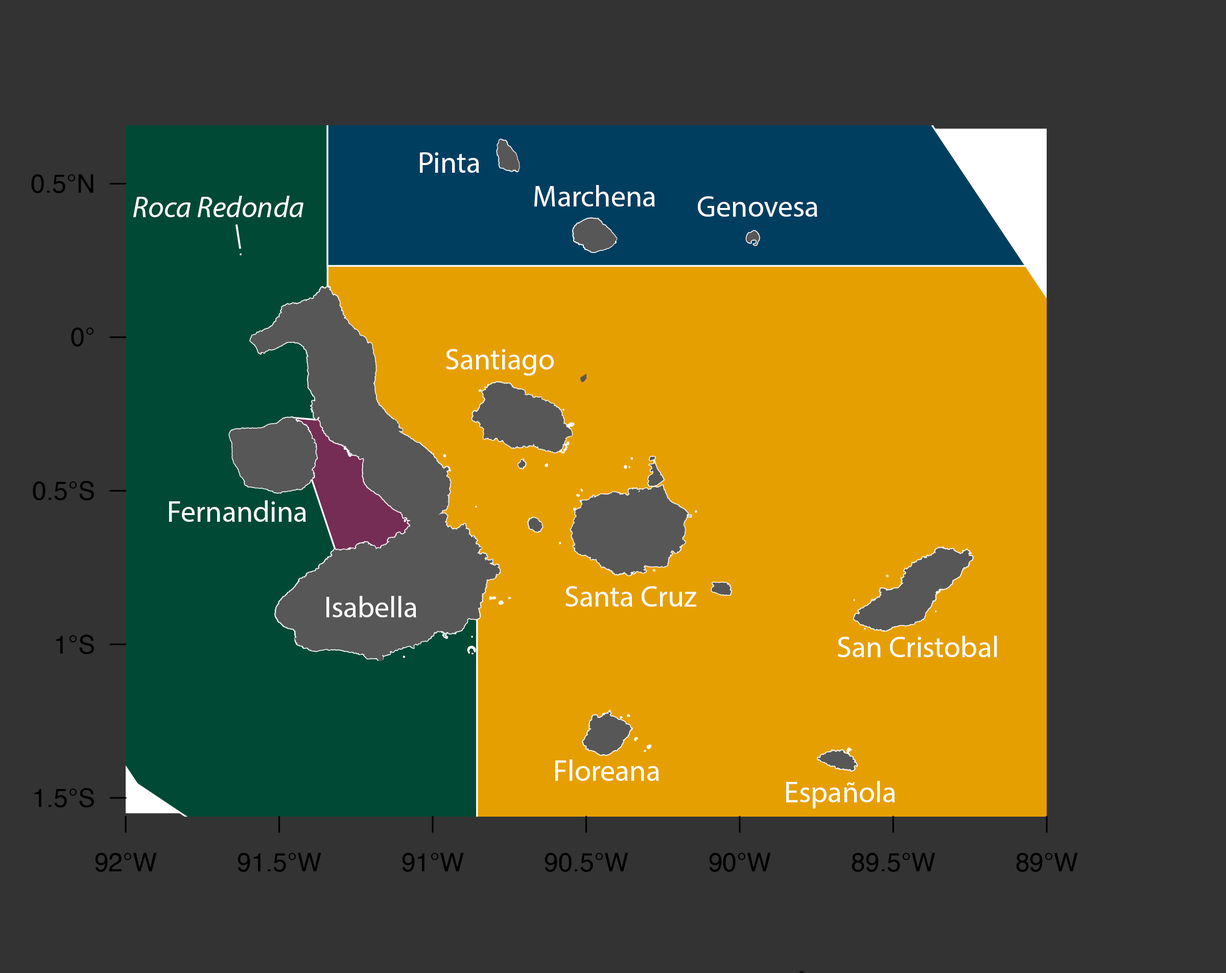
<style>
.page{position:relative;width:1226px;height:973px;background:#333333}
.page>*{position:absolute;margin:0}
.t1{font:29.8px "MyriadPro-Regular";color:#ffffff}
.t2{font:29.8px "MyriadPro-It";color:#ffffff}
</style>
<div class="page">
<p class="t1" style="left:420px;top:152px;width:59px;height:21px">Pinta</p>
<p class="t1" style="left:534px;top:185px;width:121px;height:21px">Marchena</p>
<p class="t2" style="left:133px;top:196px;width:170px;height:21px">Roca Redonda</p>
<p class="t1" style="left:698px;top:196px;width:119px;height:21px">Genovesa</p>
<p class="t1" style="left:446px;top:349px;width:108px;height:26px">Santiago</p>
<p class="t1" style="left:169px;top:500px;width:137px;height:22px">Fernandina</p>
<p class="t1" style="left:565px;top:586px;width:131px;height:20px">Santa Cruz</p>
<p class="t1" style="left:326px;top:596px;width:90px;height:21px">Isabella</p>
<p class="t1" style="left:838px;top:635px;width:159px;height:22px">San Cristobal</p>
<p class="t1" style="left:555px;top:759px;width:104px;height:22px">Floreana</p>
<p class="t1" style="left:786px;top:781px;width:109px;height:27px">Española</p>
</div>
